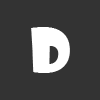
<style>
.page{position:relative;width:100px;height:100px;background:#333333}
.page>*{position:absolute;margin:0}
.t1{font:58.3px "ShowcardGothic-Reg";color:#ffffff}
</style>
<div class="page">
<p class="t1" style="left:31px;top:27px;width:39px;height:46px">d</p>
</div>
